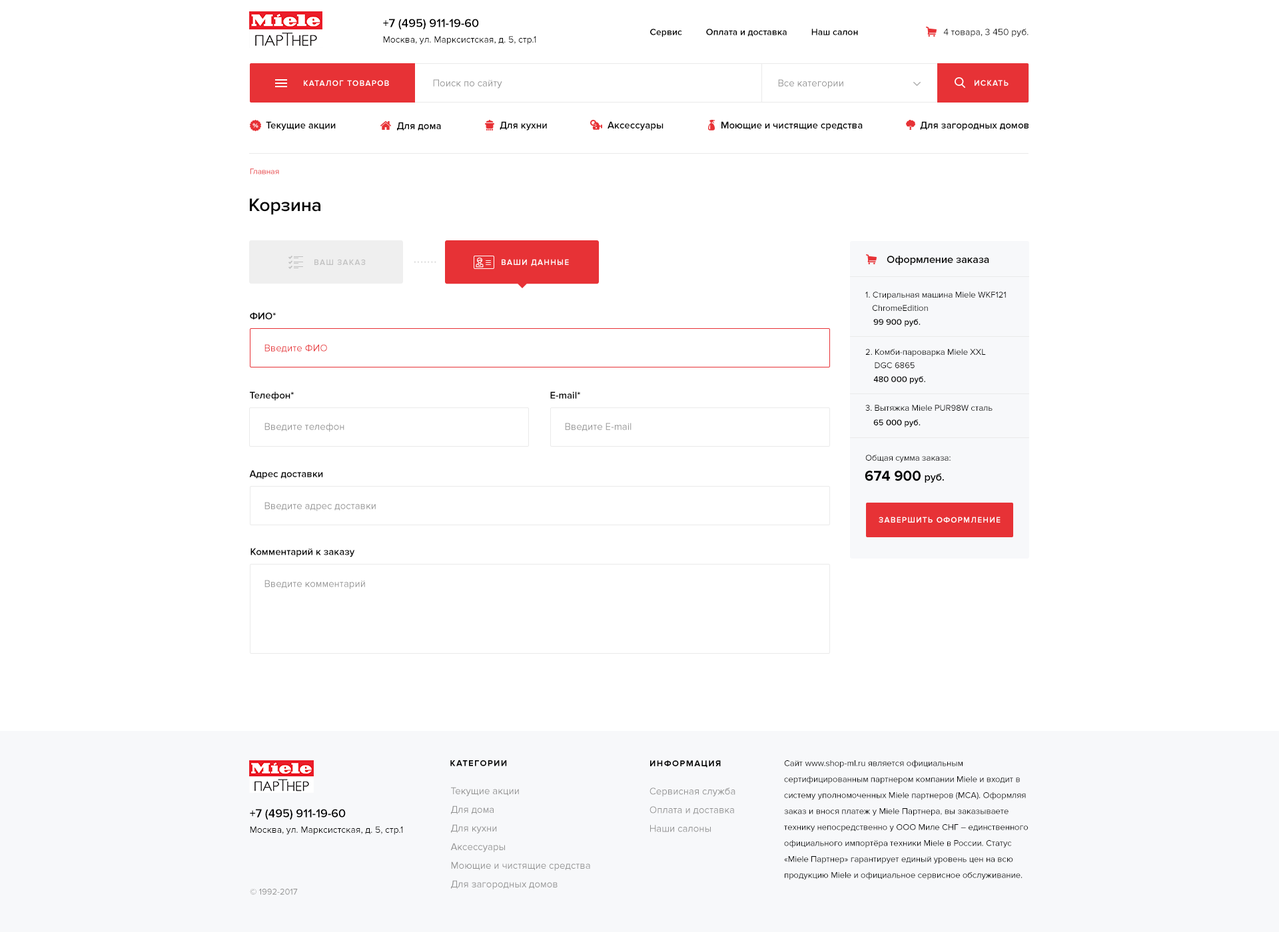
<style>
.page{position:relative;width:1279px;height:932px;background:#ffffff}
.page>*{position:absolute;margin:0}
.t1{font:12px "ProximaNova-Semibold";color:#000000}
.t2{font:9.3px "ProximaNova-Semibold";color:#000000}
.t3{font:9.3px "ProximaNova-Regular";color:#000000}
.t4{font:8px "ProximaNova-Semibold";letter-spacing:0.1em;color:#ffffff;text-transform:uppercase}
.t5{font:10px "ProximaNova-Regular";color:#909090}
.t6{font:10px "ProximaNova-Semibold";color:#000000}
.t7{font:8px "ProximaNova-Regular"}
.t8{font:18.6px "ProximaNova-Semibold";color:#000000}
.t9{font:10.7px "ProximaNova-Semibold";color:#000000}
.t10{font:8px "ProximaNova-Semibold";letter-spacing:0.1em;color:#c0c0c0;text-transform:uppercase}
.t11{font:6.7px "ProximaNova-Semibold";letter-spacing:0.15em;color:#d9d9d9}
.t12{font:8.7px/16px "ProximaNova-Regular";color:#000000}
.t13{font:8.7px/13.3px "ProximaNova-Regular";color:#000000}
.t14{font:8.7px "ProximaNova-Semibold";color:#000000}
.t15{font:10px "ProximaNova-Regular";color:#e73236}
.t16{font:8.7px "ProximaNova-Regular";color:#000000}
.t17{font:14.7px "ProximaNova-Bold";color:#000000;text-transform:uppercase}
.t18{font:8.7px "ProximaNova-Bold";letter-spacing:0.1em;color:#000000;text-transform:uppercase}
.t19{font:10px/18.6px "ProximaNova-Regular";color:#909090}
.t20{font:8.7px "ProximaNova-Regular";color:#909090}
</style>
<div class="page">
<p class="t1" style="left:383px;top:19px;width:96px;height:11px">+7 (495) 911-19-60</p>
<p class="t2" style="left:650px;top:29px;width:208px;height:8px">Сервис          Оплата и доставка          Наш салон</p>
<p class="t3" style="left:943px;top:29px;width:85px;height:8px">4 товара, 3 450 руб.</p>
<p class="t3" style="left:383px;top:36px;width:153px;height:9px">Москва, ул. Марксистская, д. 5, стр.1</p>
<p class="t4" style="left:304px;top:80px;width:85px;height:6px">Каталог товаров</p>
<p class="t5" style="left:433px;top:79px;width:69px;height:10px">Поиск по сайту</p>
<p class="t5" style="left:778px;top:79px;width:65px;height:10px">Все категории</p>
<p class="t4" style="left:974px;top:80px;width:34px;height:6px">искать</p>
<p class="t6" style="left:266px;top:121px;width:70px;height:10px">Текущие акции</p>
<p class="t6" style="left:397px;top:122px;width:44px;height:9px">Для дома</p>
<p class="t6" style="left:500px;top:121px;width:47px;height:10px">Для кухни</p>
<p class="t6" style="left:607px;top:121px;width:56px;height:10px">Аксессуары</p>
<p class="t6" style="left:721px;top:121px;width:142px;height:10px">Моющие и чистящие средства</p>
<p class="t6" style="left:920px;top:121px;width:108px;height:10px">Для загородных домов</p>
<p class="t7" style="left:250px;top:169px;width:29px;height:6px">Главная</p>
<p class="t8" style="left:250px;top:198px;width:70px;height:17px">Корзина</p>
<p class="t9" style="left:887px;top:256px;width:102px;height:9px">Оформление заказа</p>
<p class="t10" style="left:314px;top:259px;width:52px;height:6px">ваш заказ</p>
<p class="t11" style="left:414px;top:261px;width:22px;height:2px">•••••••</p>
<p class="t4" style="left:502px;top:259px;width:67px;height:7px">ваши данные</p>
<p class="t12" style="left:865px;top:292px;width:141px;height:19px">1. Стиральная машина Miele WKF121<br><span class="t13">   ChromeEdition</span></p>
<p class="t6" style="left:250px;top:312px;width:26px;height:8px">ФИО*</p>
<p class="t14" style="left:873px;top:319px;width:47px;height:8px">99 900 руб.</p>
<p class="t15" style="left:264px;top:344px;width:63px;height:9px">Введите ФИО</p>
<p class="t12" style="left:865px;top:349px;width:121px;height:19px">2. Комби-пароварка Miele XXL<br><span class="t13">    DGC 6865</span></p>
<p class="t14" style="left:873px;top:376px;width:52px;height:8px">480 000 руб.</p>
<p class="t6" style="left:250px;top:392px;width:44px;height:9px">Телефон*</p>
<p class="t6" style="left:550px;top:392px;width:30px;height:7px">E-mail*</p>
<p class="t16" style="left:865px;top:405px;width:127px;height:6px">3. Вытяжка Miele PUR98W сталь</p>
<p class="t5" style="left:264px;top:423px;width:80px;height:9px">Введите телефон</p>
<p class="t5" style="left:565px;top:423px;width:66px;height:9px">Введите E-mail</p>
<p class="t14" style="left:873px;top:420px;width:47px;height:8px">65 000 руб.</p>
<p class="t16" style="left:865px;top:455px;width:85px;height:8px">Общая сумма заказа:</p>
<p class="t6" style="left:249px;top:470px;width:74px;height:10px">Адрес доставки</p>
<p class="t17" style="left:865px;top:471px;width:79px;height:12px">674 900 <span class="t9">руб.</span></p>
<p class="t5" style="left:264px;top:502px;width:112px;height:10px">Введите адрес доставки</p>
<p class="t4" style="left:879px;top:517px;width:121px;height:6px">завершить оформление</p>
<p class="t6" style="left:250px;top:548px;width:105px;height:9px">Комментарий к заказу</p>
<p class="t5" style="left:264px;top:580px;width:101px;height:9px">Введите комментарий</p>
<p class="t18" style="left:450px;top:761px;width:57px;height:6px">Категории</p>
<p class="t18" style="left:650px;top:761px;width:71px;height:7px">Информация</p>
<p class="t12" style="left:784px;top:761px;width:244px;height:120px">Сайт www.shop-ml.ru является официальным сертифицированным партнером компании Miele и входит в систему уполномоченных Miele партнеров (MCA). Оформляя заказ и внося платеж у Miele Партнера, вы заказываете технику непосредственно у ООО Миле СНГ – единственного официального импортёра техники Miele в России. Статус «Miele Партнер» гарантирует единый уровень цен на всю продукцию Miele и официальное сервисное обслуживание.</p>
<p class="t19" style="left:450px;top:787px;width:140px;height:103px">Текущие акции<br>Для дома<br>Для кухни<br>Аксессуары<br>Моющие и чистящие средства<br>Для загородных домов</p>
<p class="t19" style="left:649px;top:788px;width:86px;height:45px">Сервисная служба<br>Оплата и доставка<br>Наши салоны</p>
<p class="t1" style="left:250px;top:809px;width:96px;height:12px">+7 (495) 911-19-60</p>
<p class="t3" style="left:250px;top:827px;width:153px;height:8px">Москва, ул. Марксистская, д. 5, стр.1</p>
<p class="t20" style="left:250px;top:889px;width:48px;height:6px">© 1992-2017</p>
</div>
